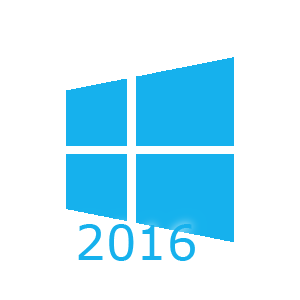
<style>
.page{position:relative;width:300px;height:300px;background:#ffffff}
.page>*{position:absolute;margin:0}
.t1{font:48px "Verdana";color:#16b2ed}
</style>
<div class="page">
<p class="t1" style="left:78px;top:224px;width:117px;height:37px">2016</p>
</div>
